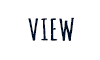
<style>
.page{position:relative;width:100px;height:60px;background:#ffffff}
.page>*{position:absolute;margin:0}
.t1{font:28.8px "AmaticSC-Regular";color:#030e27;font-weight:bold;scale:1.22 1}
</style>
<div class="page">
<p class="t1" style="left:28px;top:17px;width:46px;height:24px">VIEW</p>
</div>
